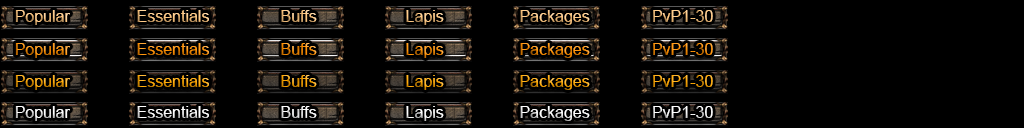
<style>
.page{position:relative;width:1024px;height:128px;background:#000000}
.page>*{position:absolute;margin:0}
.t1{font:16px "ArialMT"}
.t2{font:16px "ArialMT";color:#ffffff}
</style>
<div class="page">
<p class="t1" style="left:15px;top:10px;width:698px;height:15px">Popular               Essentials                Buffs                    Lapis                 Packages              PvP1-30</p>
<p class="t1" style="left:15px;top:43px;width:698px;height:15px">Popular               Essentials                Buffs                    Lapis                 Packages              PvP1-30</p>
<p class="t1" style="left:15px;top:75px;width:698px;height:15px">Popular               Essentials                Buffs                    Lapis                 Packages              PvP1-30</p>
<p class="t2" style="left:15px;top:106px;width:698px;height:15px">Popular               Essentials                Buffs                    Lapis                 Packages              PvP1-30</p>
</div>
